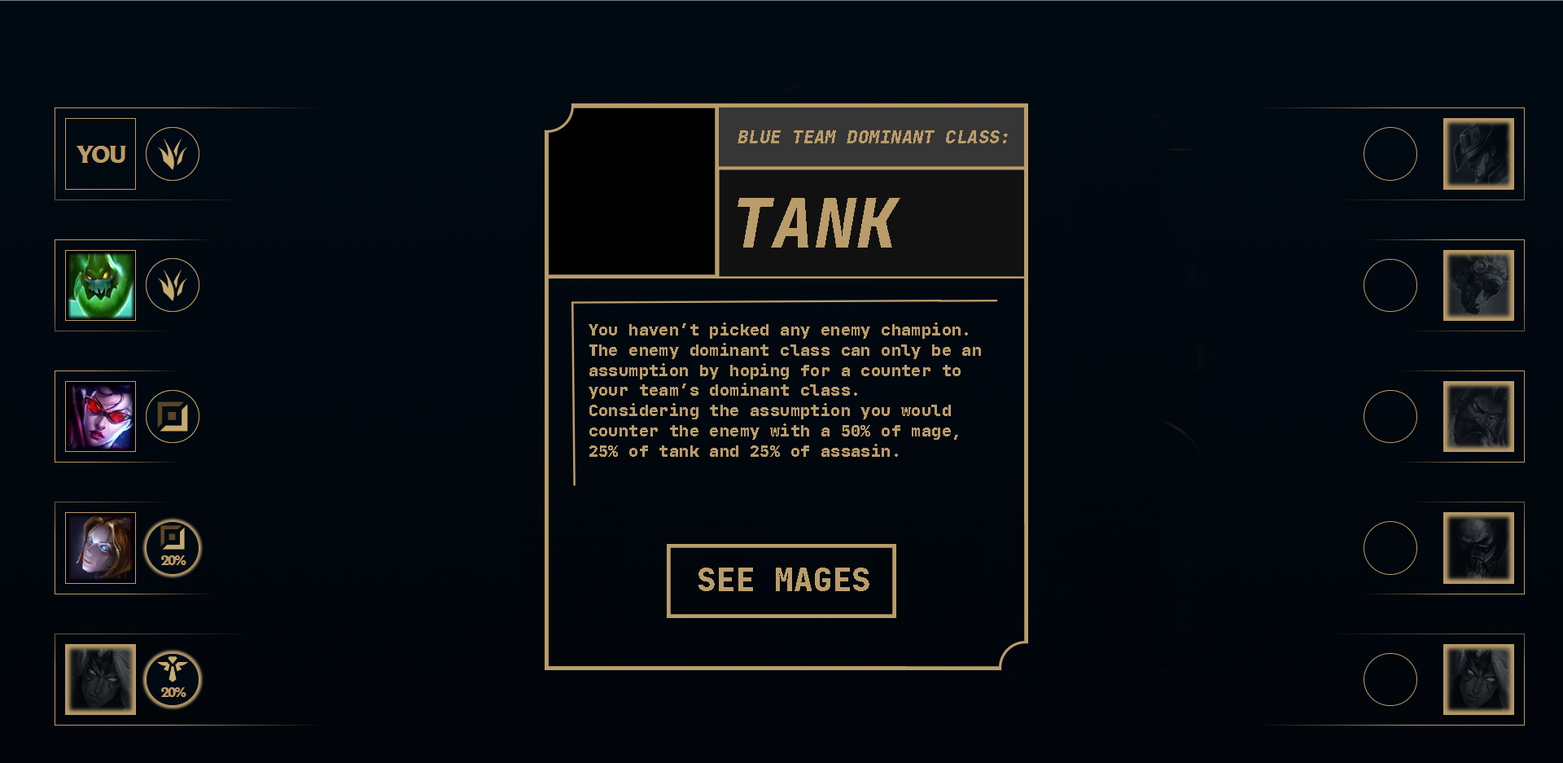
<style>
.page{position:relative;width:1563px;height:763px}
.page>*{position:absolute;margin:0}
.t1{font:17.9px "JetBrainsMono-ExtraBold";letter-spacing:0.02em;color:#b99c6a;font-style:italic}
.t2{font:67.6px "JetBrainsMono-ExtraBold";letter-spacing:0.02em;color:#b99c6a;font-style:italic}
.t3{font:16.3px/20.2px "JetBrainsMono-ExtraBold";letter-spacing:0.02em;color:#b99c6a}
.t4{font:31.8px "JetBrainsMono-ExtraBold";letter-spacing:0.02em;color:#b99c6a}
</style>
<div class="page">
<p class="t1" style="left:738px;top:130px;width:270px;height:13px">BLUE TEAM DOMINANT CLASS:</p>
<p class="t2" style="left:738px;top:198px;width:162px;height:49px">TANK</p>
<p class="t3" style="left:589px;top:322px;width:392px;height:135px">You haven’t picked any enemy champion.<br>The enemy dominant class can only be an assumption by hoping for a counter to your team’s dominant class.<br>Considering the assumption you would counter the enemy with a 50% of mage, 25% of tank and 25% of assasin.</p>
<p class="t4" style="left:699px;top:567px;width:170px;height:24px">SEE MAGES</p>
</div>
